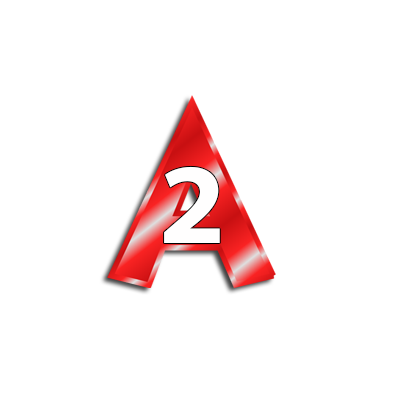
<style>
.page{position:relative;width:400px;height:400px;background:#ffffff}
.page>*{position:absolute;margin:0}
.t1{font:115.9px "MyriadPro-Bold";color:#fffefe;scale:1.04 1}
</style>
<div class="page">
<p class="t1" style="left:164px;top:166px;width:56px;height:77px">2</p>
</div>
